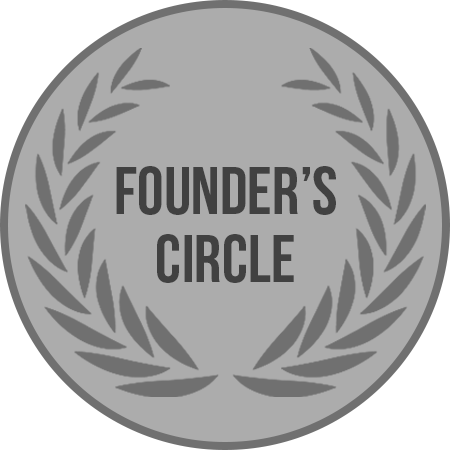
<style>
.page{position:relative;width:450px;height:450px;background:#acacac}
.page>*{position:absolute;margin:0}
.t1{font:67.7px/67.9px "BebasNeueBold";color:#414141}
</style>
<div class="page">
<p class="t1" style="left:116px;top:166px;width:220px;height:117px;text-align:center">founder’s<br>circle</p>
</div>
